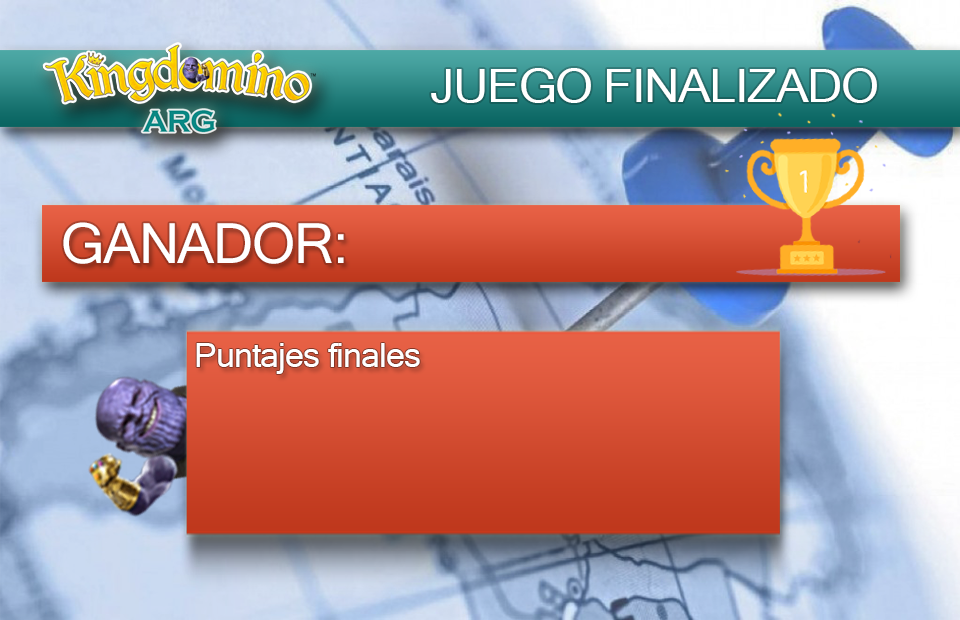
<style>
.page{position:relative;width:960px;height:620px}
.page>*{position:absolute;margin:0}
.t1{font:45.8px "MicrosoftSansSerif";letter-spacing:-0.025em;color:#ffffff;scale:1.06 1}
.t2{font:55.6px "MicrosoftSansSerif";letter-spacing:-0.025em;color:#ffffff}
.t3{font:33.2px "MicrosoftSansSerif";letter-spacing:-0.025em;color:#ffffff}
</style>
<div class="page">
<p class="t1" style="left:431px;top:68px;width:446px;height:35px">JUEGO FINALIZADO</p>
<p class="t2" style="left:63px;top:222px;width:281px;height:42px">GANADOR:</p>
<p class="t3" style="left:196px;top:343px;width:224px;height:31px">Puntajes finales</p>
</div>
